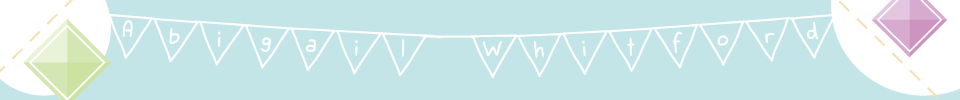
<style>
.page{position:relative;width:960px;height:100px;background:#c4e5e7}
.page>*{position:absolute;margin:0}
.t1{font:62px "PaperBanner-Regular";color:#fefefe}
</style>
<div class="page">
<p class="t1" style="left:107px;top:13px;width:729px;height:65px">Abigail Whitford</p>
</div>
